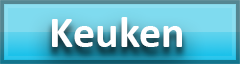
<style>
.page{position:relative;width:240px;height:64px}
.page>*{position:absolute;margin:0}
.t1{font:44.4px "Calibri-Bold";color:#ffffff}
</style>
<div class="page">
<p class="t1" style="left:52px;top:17px;width:130px;height:30px">Keuken</p>
</div>
